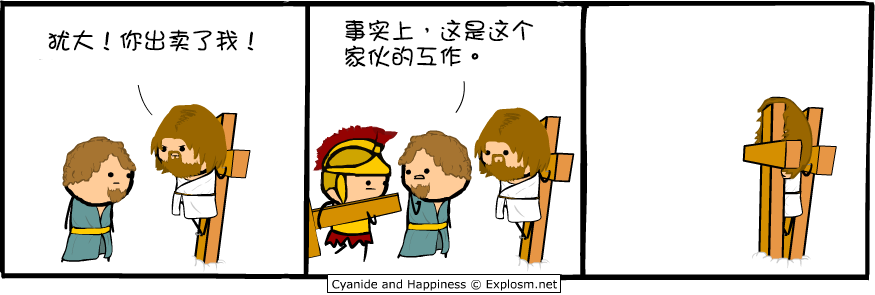
<style>
.page{position:relative;width:875px;height:295px;background:#ffffff}
.page>*{position:absolute;margin:0}
.t1{font:24px "DFGirl";color:#000000}
.t2{font:24px/26px "DFGirl";color:#000000}
</style>
<div class="page">
<p class="t1" style="left:48px;top:29px;width:206px;height:23px">犹大！你出卖了我！</p>
<p class="t2" style="left:345px;top:19px;width:189px;height:48px">事实上，这是这个<br>家伙的工作。</p>
</div>
